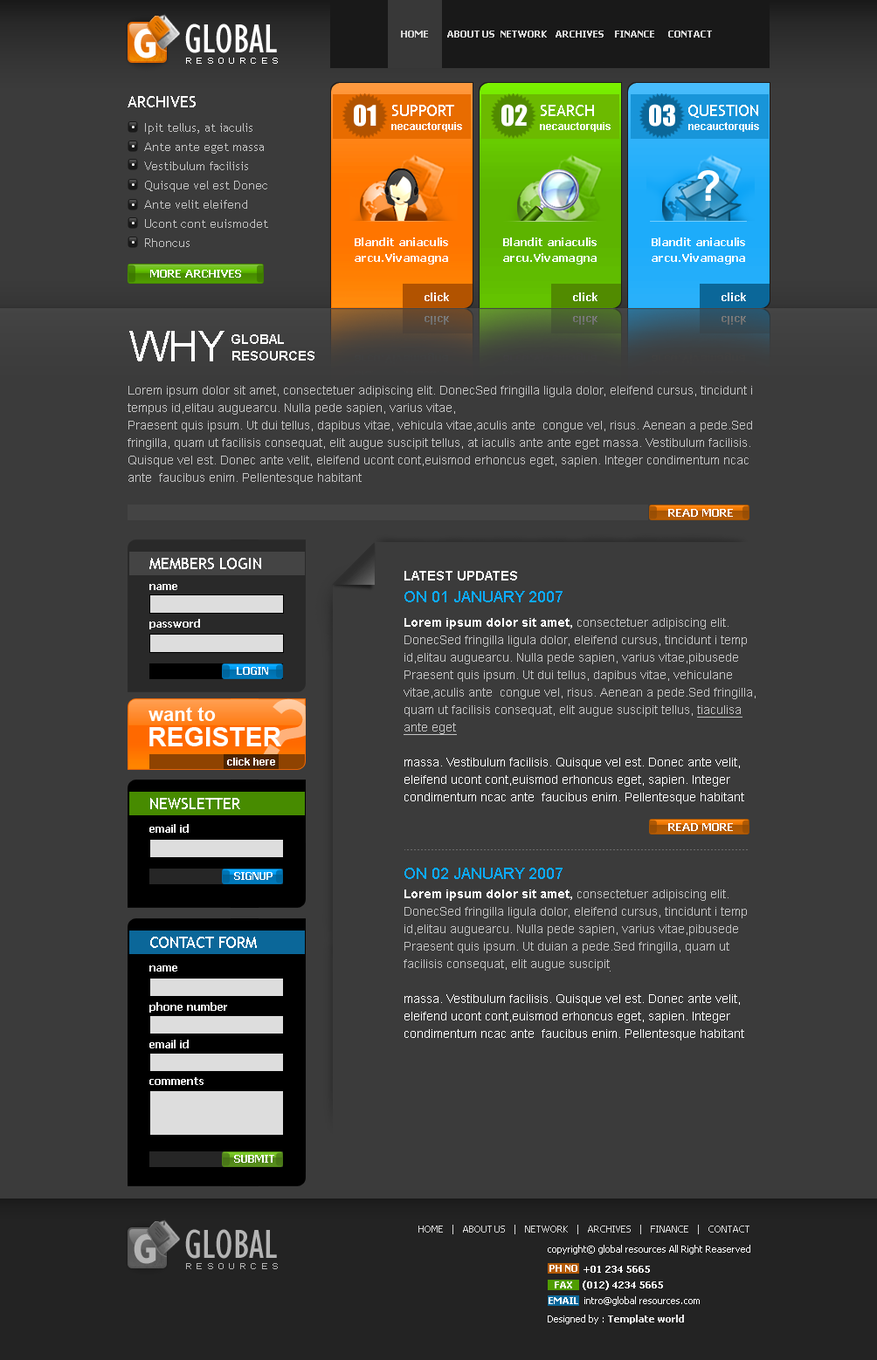
<style>
.page{position:relative;width:877px;height:1360px;background:#3b3b3b}
.page>*{position:absolute;margin:0}
.t1{font:41.9px "GillSansMT-Condensed";color:#ffffff;text-transform:uppercase}
.t2{font:9.6px "Tahoma-Bold";color:#d9d9d9;text-transform:uppercase}
.t3{font:9.6px "Tahoma-Bold";letter-spacing:-0.01em;color:#d9d9d9;text-transform:uppercase}
.t4{font:7px "Standard0754";letter-spacing:0.545em;color:#ffffff;text-transform:uppercase}
.t5{font:15.7px "TrebuchetMS";color:#ffffff;text-transform:uppercase}
.t6{font:26.2px "Impact";color:#ffffff;text-transform:uppercase}
.t7{font:12.2px/19.2px "TrebuchetMS";color:#c4c4c4}
.t8{font:10.5px "Arial-BoldMT";color:#ffffff}
.t9{font:41.9px "Arial-BoldMT";color:#ffffff;text-transform:uppercase}
.t10{font:11.4px/15.7px "Tahoma-Bold";letter-spacing:0.025em;color:#ffffff}
.t11{font:11.4px "Tahoma-Bold";color:#ffffff;text-transform:uppercase}
.t12{font:11.4px "Arial-BoldMT";color:#ffffff}
.t13{font:41.9px "ArialMT";color:#ffffff;text-transform:uppercase}
.t14{font:13.1px "Arial-BoldMT";color:#ffffff;text-transform:uppercase}
.t15{font:12.2px/17.5px "ArialMT";color:#c4c4c4}
.t16{font:10.5px "Tahoma-Bold";color:#ffffff}
.t17{font:15.7px "ArialMT";color:#0daaff;text-transform:uppercase}
.t18{font:12.2px/17.5px "Arial-BoldMT";color:#ffffff}
.t19{font:12.2px/17.5px "ArialMT";color:#c4c4c4;text-decoration:underline}
.t20{font:12.2px/17.5px "ArialMT";color:#ffffff}
.t21{font:87.3px "Arial-BoldMT"}
.t22{font:19.2px "Arial-BoldMT";color:#ffffff}
.t23{font:26.2px "Arial-BoldMT";color:#ffffff;text-transform:uppercase}
.t24{font:9.6px "Tahoma";color:#d9d9d9;text-transform:uppercase}
.t25{font:9.6px "Tahoma";letter-spacing:-0.01em;color:#d9d9d9;text-transform:uppercase}
.t26{font:9.6px "Tahoma";color:#ffffff}
.t27{font:9.6px "Tahoma-Bold";color:#ffffff;text-transform:uppercase}
.t28{font:9.6px "Tahoma-Bold";color:#e9e9e9}
</style>
<div class="page">
<p class="t1" style="left:185px;top:24px;width:92px;height:29px">global</p>
<p class="t2" style="left:401px;top:31px;width:311px;height:7px">Home       <span class="t3">About us</span>  Network   Archives    Finance     Contact</p>
<p class="t4" style="left:186px;top:58px;width:92px;height:6px">resources</p>
<p class="t5" style="left:127px;top:96px;width:69px;height:11px">archives</p>
<p class="t6" style="left:354px;top:104px;width:22px;height:23px">01</p>
<p class="t5" style="left:392px;top:105px;width:62px;height:11px">support</p>
<p class="t6" style="left:501px;top:104px;width:26px;height:23px">02</p>
<p class="t5" style="left:540px;top:105px;width:54px;height:11px">search</p>
<p class="t6" style="left:649px;top:104px;width:26px;height:23px">03</p>
<p class="t5" style="left:688px;top:105px;width:70px;height:13px">question</p>
<p class="t7" style="left:144px;top:123px;width:124px;height:124px">Ipit tellus, at iaculis <br>Ante ante eget massa Vestibulum facilisis Quisque vel est Donec Ante velit eleifend<br>Ucont cont euismodet Rhoncus</p>
<p class="t8" style="left:391px;top:122px;width:71px;height:10px">necauctorquis</p>
<p class="t8" style="left:540px;top:122px;width:70px;height:10px">necauctorquis</p>
<p class="t8" style="left:688px;top:122px;width:71px;height:10px">necauctorquis</p>
<p class="t9" style="left:697px;top:170px;width:22px;height:31px">?</p>
<p class="t10" style="left:354px;top:237px;width:94px;height:28px">Blandit aniaculis arcu.Vivamagna</p>
<p class="t10" style="left:503px;top:237px;width:93px;height:28px">Blandit aniaculis arcu.Vivamagna</p>
<p class="t10" style="left:651px;top:237px;width:94px;height:28px">Blandit aniaculis arcu.Vivamagna</p>
<p class="t11" style="left:150px;top:270px;width:91px;height:8px">more archives</p>
<p class="t12" style="left:424px;top:292px;width:25px;height:9px">click</p>
<p class="t12" style="left:573px;top:292px;width:24px;height:9px">click</p>
<p class="t12" style="left:721px;top:292px;width:25px;height:9px">click</p>
<p class="t13" style="left:129px;top:331px;width:95px;height:30px">why</p>
<p class="t14" style="left:231px;top:334px;width:53px;height:10px">global</p>
<p class="t14" style="left:232px;top:351px;width:82px;height:10px">resources</p>
<p class="t15" style="left:127px;top:386px;width:625px;height:99px">Lorem ipsum dolor sit amet, consectetuer adipiscing elit. DonecSed fringilla ligula dolor, eleifend cursus, tincidunt i tempus id,elitau auguearcu. Nulla pede sapien, varius vitae, <br>Praesent quis ipsum. Ut dui tellus, dapibus vitae, vehicula vitae,aculis ante  congue vel, risus. Aenean a pede.Sed fringilla, quam ut facilisis consequat, elit augue suscipit tellus, at iaculis ante ante eget massa. Vestibulum facilisis. Quisque vel est. Donec ante velit, eleifend ucont cont,euismod erhoncus eget, sapien. Integer condimentum ncac <br>ante  faucibus enim. Pellentesque habitant</p>
<p class="t11" style="left:668px;top:509px;width:65px;height:8px">read more</p>
<p class="t5" style="left:149px;top:558px;width:112px;height:11px">members login</p>
<p class="t14" style="left:404px;top:571px;width:113px;height:10px">latest updates</p>
<p class="t16" style="left:149px;top:584px;width:28px;height:6px">name</p>
<p class="t17" style="left:404px;top:591px;width:158px;height:11px">on 01 january 2007</p>
<p class="t16" style="left:149px;top:619px;width:51px;height:11px">password</p>
<p class="t15" style="left:403px;top:618px;width:352px;height:186px"><span class="t18">Lorem ipsum dolor sit amet, </span>consectetuer adipiscing elit. DonecSed fringilla ligula dolor, eleifend cursus, tincidunt i temp id,elitau auguearcu. Nulla pede sapien, varius vitae,pibusede  <br>Praesent quis ipsum. Ut dui tellus, dapibus vitae, vehiculane vitae,aculis ante  congue vel, risus. Aenean a pede.Sed fringilla, quam ut facilisis consequat, elit augue suscipit tellus, <span class="t19">tiaculisa ante eget<br><br></span><span class="t20">massa. Vestibulum facilisis. Quisque vel est. Donec ante velit, eleifend ucont cont,euismod erhoncus eget, sapien. Integer condimentum ncac ante  faucibus enim. Pellentesque habitant</span></p>
<p class="t11" style="left:237px;top:667px;width:31px;height:8px">login</p>
<p class="t21" style="left:263px;top:698px;width:50px;height:62px;rotate:32deg">?</p>
<p class="t22" style="left:148px;top:707px;width:68px;height:14px">want to</p>
<p class="t23" style="left:149px;top:727px;width:132px;height:20px">register</p>
<p class="t8" style="left:227px;top:758px;width:48px;height:8px">click here</p>
<p class="t5" style="left:150px;top:798px;width:90px;height:11px">newsletter</p>
<p class="t16" style="left:149px;top:824px;width:40px;height:9px">email id</p>
<p class="t11" style="left:668px;top:823px;width:65px;height:8px">read more</p>
<p class="t17" style="left:404px;top:868px;width:158px;height:11px">on 02 january 2007</p>
<p class="t11" style="left:234px;top:872px;width:38px;height:8px">signup</p>
<p class="t15" style="left:403px;top:890px;width:344px;height:151px"><span class="t18">Lorem ipsum dolor sit amet, </span>consectetuer adipiscing elit. DonecSed fringilla ligula dolor, eleifend cursus, tincidunt i temp id,elitau auguearcu. Nulla pede sapien, varius vitae,pibusede  <br>Praesent quis ipsum. Ut duian a pede.Sed fringilla, quam ut facilisis consequat, elit augue suscipit<br><br><span class="t20">massa. Vestibulum facilisis. Quisque vel est. Donec ante velit, eleifend ucont cont,euismod erhoncus eget, sapien. Integer condimentum ncac ante  faucibus enim. Pellentesque habitant</span></p>
<p class="t5" style="left:150px;top:937px;width:107px;height:11px">contact form</p>
<p class="t16" style="left:149px;top:966px;width:28px;height:6px">name</p>
<p class="t16" style="left:149px;top:1002px;width:78px;height:11px">phone number</p>
<p class="t16" style="left:149px;top:1040px;width:40px;height:9px">email id</p>
<p class="t16" style="left:149px;top:1077px;width:54px;height:8px">comments</p>
<p class="t11" style="left:234px;top:1155px;width:40px;height:8px">submit</p>
<p class="t24" style="left:418px;top:1225px;width:331px;height:10px">Home   |   <span class="t25">About us</span>   |   Network   |   Archives   |   Finance   |   Contact</p>
<p class="t26" style="left:547px;top:1245px;width:203px;height:10px">copyright© global resources All Right Reaserved</p>
<p class="t27" style="left:549px;top:1265px;width:28px;height:7px">ph no</p>
<p class="t27" style="left:583px;top:1266px;width:67px;height:7px">+01 234 5665</p>
<p class="t27" style="left:554px;top:1282px;width:18px;height:7px">fax</p>
<p class="t27" style="left:582px;top:1281px;width:81px;height:9px">(012) 4234 5665</p>
<p class="t27" style="left:548px;top:1297px;width:30px;height:7px">email</p>
<p class="t26" style="left:584px;top:1297px;width:115px;height:9px">intro@global resources.com</p>
<p class="t28" style="left:547px;top:1315px;width:137px;height:9px"><span class="t26">Designed by : </span>Template world</p>
</div>
